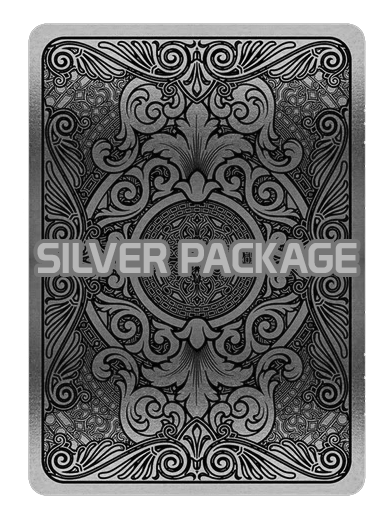
<style>
.page{position:relative;width:388px;height:517px;background:#ffffff}
.page>*{position:absolute;margin:0}
.t1{font:42px "Prototype";color:#b7b7b7}
</style>
<div class="page">
<p class="t1" style="left:37px;top:243px;width:320px;height:30px">SILVER PACKAGE</p>
</div>
